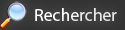
<style>
.page{position:relative;width:125px;height:30px}
.page>*{position:absolute;margin:0}
.t1{font:17.6px "MyriadPro-Regular";color:#ffffff}
</style>
<div class="page">
<p class="t1" style="left:35px;top:8px;width:82px;height:13px">Rechercher</p>
</div>
